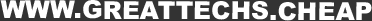
<style>
.page{position:relative;width:372px;height:21px;background:#333333}
.page>*{position:absolute;margin:0}
.t1{font:24.8px "Arial-Black";color:#ffffff;text-transform:uppercase}
</style>
<div class="page">
<p class="t1" style="left:0px;top:0px;width:372px;height:21px">www.GreatTechs.cheap</p>
</div>
